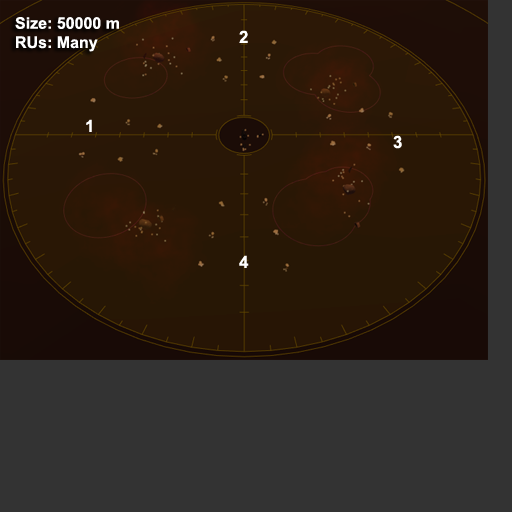
<style>
.page{position:relative;width:512px;height:512px;background:#333333}
.page>*{position:absolute;margin:0}
.t1{font:16px "Arial-BoldMT";color:#ffffff}
.t2{font:17px "Arial-BoldMT";color:#ffffff}
</style>
<div class="page">
<p class="t1" style="left:15px;top:17px;width:104px;height:35px">Size: 50000 m<br>RUs: Many</p>
<p class="t2" style="left:239px;top:30px;width:9px;height:13px">2</p>
<p class="t2" style="left:86px;top:119px;width:6px;height:13px">1</p>
<p class="t2" style="left:393px;top:135px;width:9px;height:14px">3</p>
<p class="t2" style="left:239px;top:255px;width:10px;height:13px">4</p>
</div>
